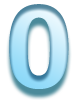
<style>
.page{position:relative;width:80px;height:100px;background:#ffffff}
.page>*{position:absolute;margin:0}
.t1{font:115.6px "Arial-BoldMT";scale:1.1 1}
</style>
<div class="page">
<p class="t1" style="left:9px;top:4px;width:60px;height:85px">0</p>
</div>
